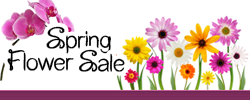
<style>
.page{position:relative;width:250px;height:100px;background:#ffffff}
.page>*{position:absolute;margin:0}
.t1{font:26.7px "FlowerInTheWindow";color:#000000;font-weight:bold}
.t2{font:32.1px "FlowerInTheWindow";color:#000000;font-weight:bold;scale:0.84 1}
</style>
<div class="page">
<p class="t1" style="left:46px;top:26px;width:65px;height:28px"><span class="t2">S</span>pring</p>
<p class="t1" style="left:7px;top:49px;width:67px;height:22px"><span class="t2">F</span>lower</p>
<p class="t1" style="left:79px;top:49px;width:46px;height:23px"><span class="t2">S</span>ale</p>
</div>
